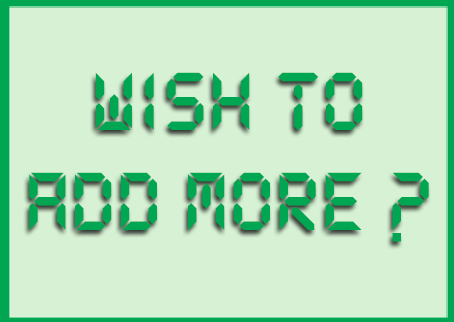
<style>
.page{position:relative;width:454px;height:322px;background:#d6f1d3}
.page>*{position:absolute;margin:0}
.t1{font:90px/100px "DS-Digital-Bold";color:#00a651}
</style>
<div class="page">
<p class="t1" style="left:29px;top:72px;width:400px;height:170px;text-align:center">wish to<br>add more ?</p>
</div>
